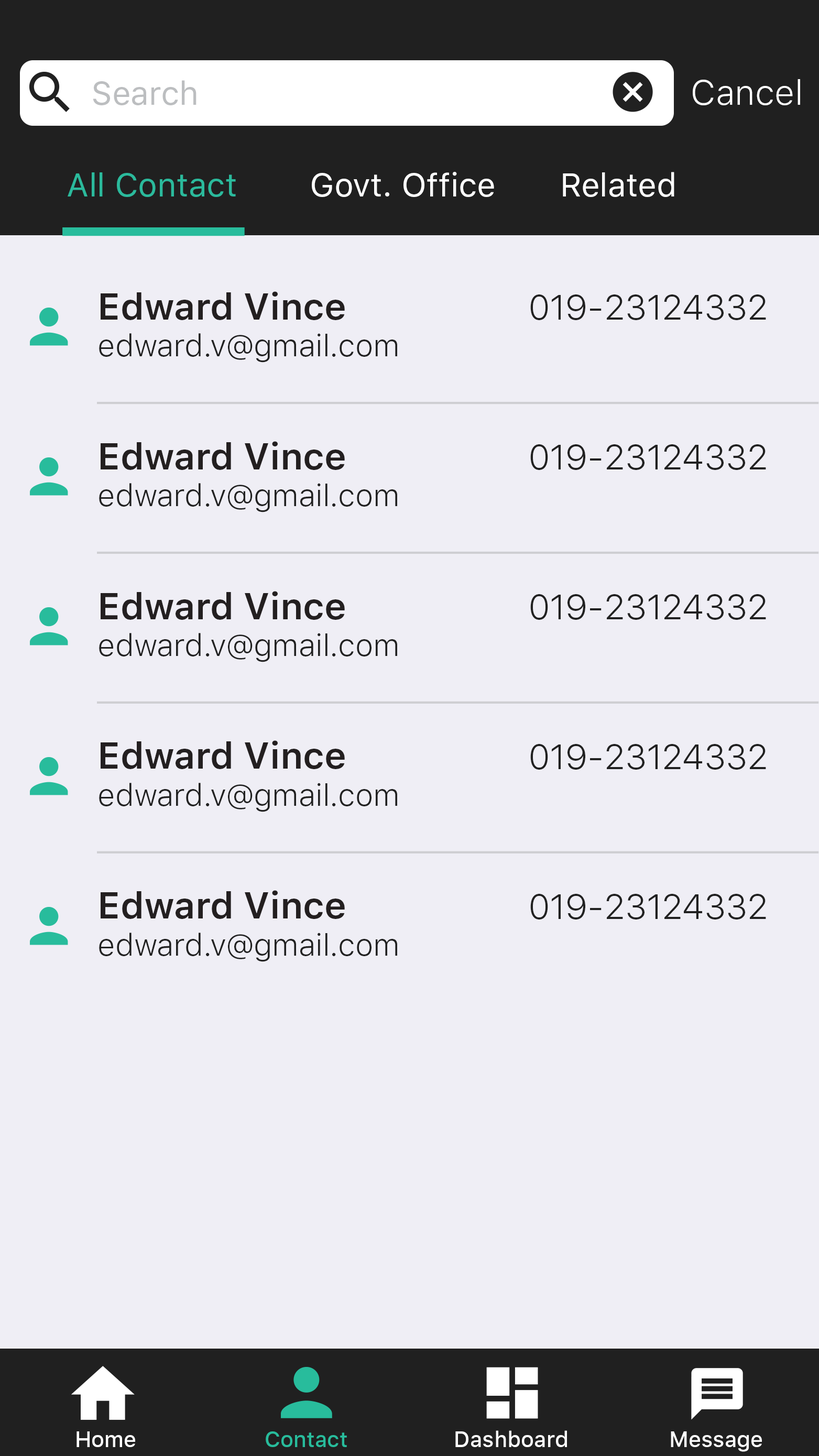
<style>
.page{position:relative;width:819px;height:1456px;background:#efeef5}
.page>*{position:absolute;margin:0}
.t1{font:32.7px "SFUIText-Regular";color:#bcbec0}
.t2{font:34.9px "SFUIText-Light";color:#ffffff}
.t3{font:32.7px "SFUIText-Regular";color:#2bba9c}
.t4{font:32.7px "SFUIText-Regular";color:#ffffff}
.t5{font:37.1px "SFUIText-Semibold";color:#231f20}
.t6{font:34.9px "SFUIText-Light";color:#212121}
.t7{font:30.6px "SFUIText-Light";color:#212121}
.t8{font:21.8px "SFUIText-Medium";color:#ffffff}
.t9{font:21.8px "SFUIText-Medium";color:#28bc9c}
</style>
<div class="page">
<p class="t1" style="left:93px;top:80px;width:103px;height:25px">Search</p>
<p class="t2" style="left:693px;top:79px;width:107px;height:26px">Cancel</p>
<p class="t3" style="left:68px;top:172px;width:168px;height:25px">All Contact</p>
<p class="t4" style="left:312px;top:172px;width:182px;height:25px">Govt. Office</p>
<p class="t4" style="left:563px;top:172px;width:111px;height:25px">Related</p>
<p class="t5" style="left:101px;top:291px;width:244px;height:29px">Edward Vince</p>
<p class="t6" style="left:530px;top:294px;width:236px;height:26px">019-23124332</p>
<p class="t7" style="left:99px;top:333px;width:298px;height:30px">edward.v@gmail.com</p>
<p class="t5" style="left:101px;top:441px;width:244px;height:29px">Edward Vince</p>
<p class="t6" style="left:530px;top:444px;width:236px;height:26px">019-23124332</p>
<p class="t7" style="left:99px;top:483px;width:298px;height:29px">edward.v@gmail.com</p>
<p class="t5" style="left:101px;top:591px;width:244px;height:29px">Edward Vince</p>
<p class="t6" style="left:530px;top:594px;width:236px;height:26px">019-23124332</p>
<p class="t7" style="left:99px;top:633px;width:298px;height:29px">edward.v@gmail.com</p>
<p class="t5" style="left:101px;top:740px;width:244px;height:29px">Edward Vince</p>
<p class="t6" style="left:530px;top:744px;width:236px;height:26px">019-23124332</p>
<p class="t7" style="left:99px;top:783px;width:298px;height:29px">edward.v@gmail.com</p>
<p class="t5" style="left:101px;top:890px;width:244px;height:29px">Edward Vince</p>
<p class="t6" style="left:530px;top:894px;width:236px;height:26px">019-23124332</p>
<p class="t7" style="left:99px;top:933px;width:298px;height:29px">edward.v@gmail.com</p>
<p class="t8" style="left:76px;top:1431px;width:59px;height:16px">Home</p>
<p class="t9" style="left:266px;top:1431px;width:81px;height:16px">Contact</p>
<p class="t8" style="left:455px;top:1430px;width:112px;height:17px">Dashboard</p>
<p class="t8" style="left:671px;top:1431px;width:91px;height:21px">Message</p>
</div>
